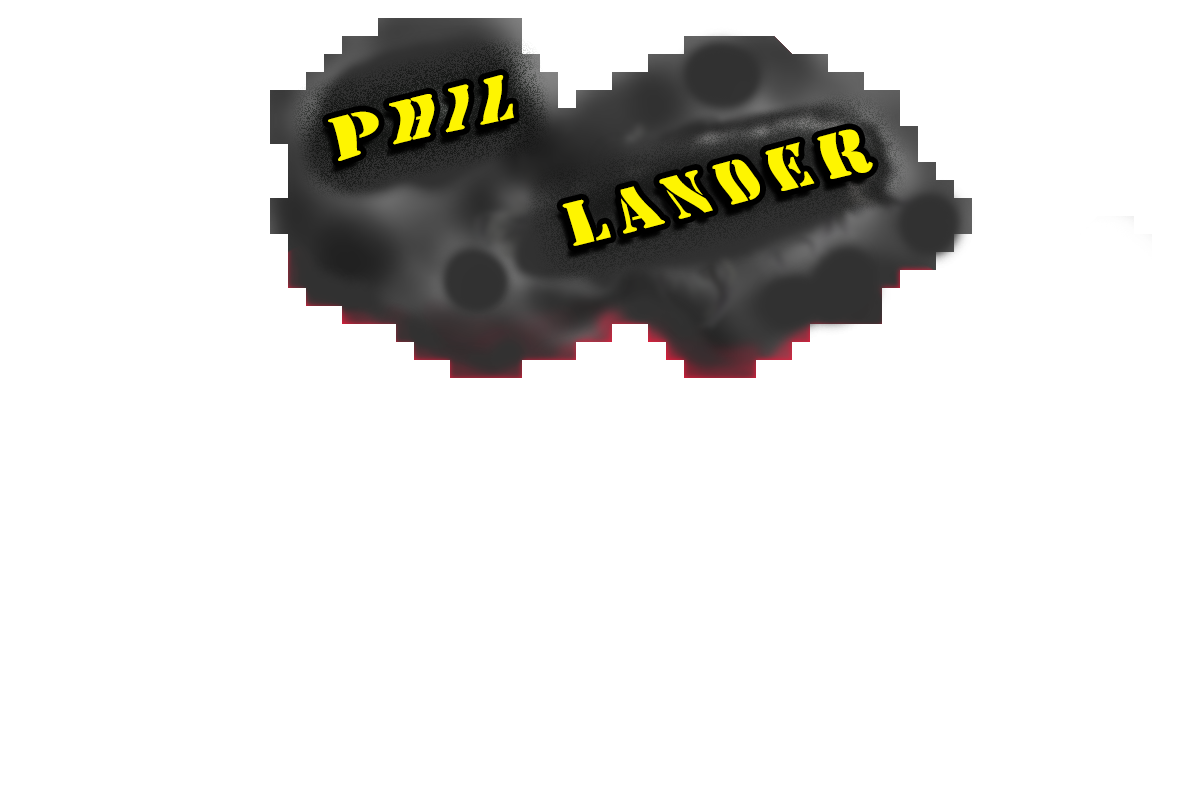
<style>
.page{position:relative;width:1200px;height:800px;background:#ffffff}
.page>*{position:absolute;margin:0}
.t1{font:59.8px "StencilStd";letter-spacing:0.205em;color:#fef500}
</style>
<div class="page">
<p class="t1" style="left:328px;top:75px;width:186px;height:86px;rotate:-14deg">PHIL</p>
<p class="t1" style="left:562px;top:129px;width:311px;height:117px;rotate:-14deg">Lander</p>
</div>
